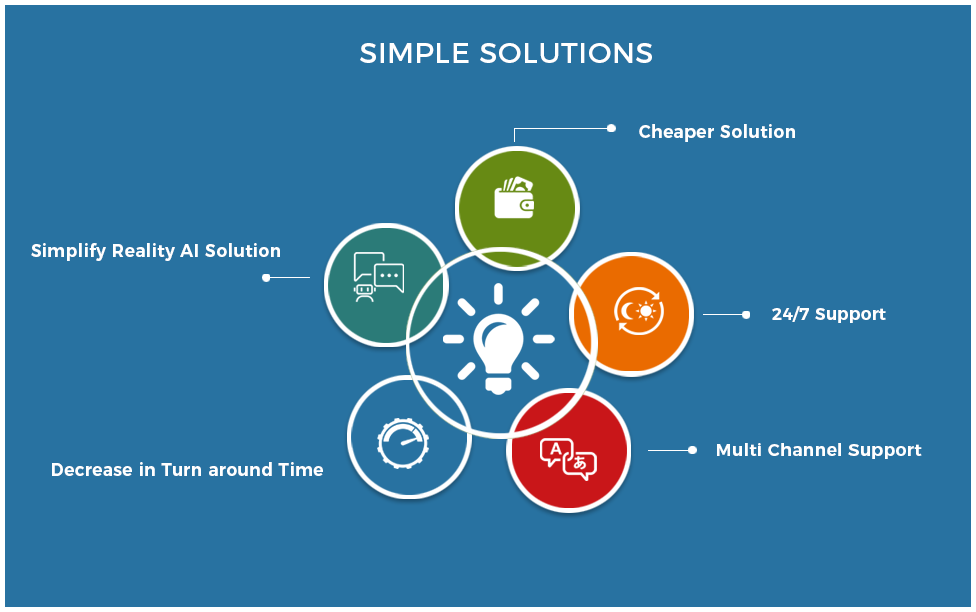
<style>
.page{position:relative;width:976px;height:612px;background:#2872a1}
.page>*{position:absolute;margin:0}
.t1{font:28.7px "Montserrat-Regular";letter-spacing:0.02em;color:#ffffff;text-transform:uppercase}
.t2{font:18.2px "Montserrat-SemiBold";letter-spacing:0.02em;color:#ffffff;scale:0.95 1}
.t3{font:17px "Montserrat-SemiBold";color:#ffffff}
.t4{font:17px "Montserrat-SemiBold";letter-spacing:0.02em;color:#ffffff}
</style>
<div class="page">
<p class="t1" style="left:360px;top:43px;width:292px;height:20px">SIMPLE SOLUTIONS</p>
<p class="t2" style="left:639px;top:124px;width:156px;height:18px">Cheaper Solution</p>
<p class="t2" style="left:31px;top:243px;width:249px;height:18px">Simplify Reality AI Solution</p>
<p class="t3" style="left:772px;top:306px;width:114px;height:17px">24/7 Support</p>
<p class="t4" style="left:717px;top:443px;width:205px;height:16px">Multi Channel Support</p>
<p class="t2" style="left:52px;top:462px;width:271px;height:14px">Decrease in Turn around Time</p>
</div>
